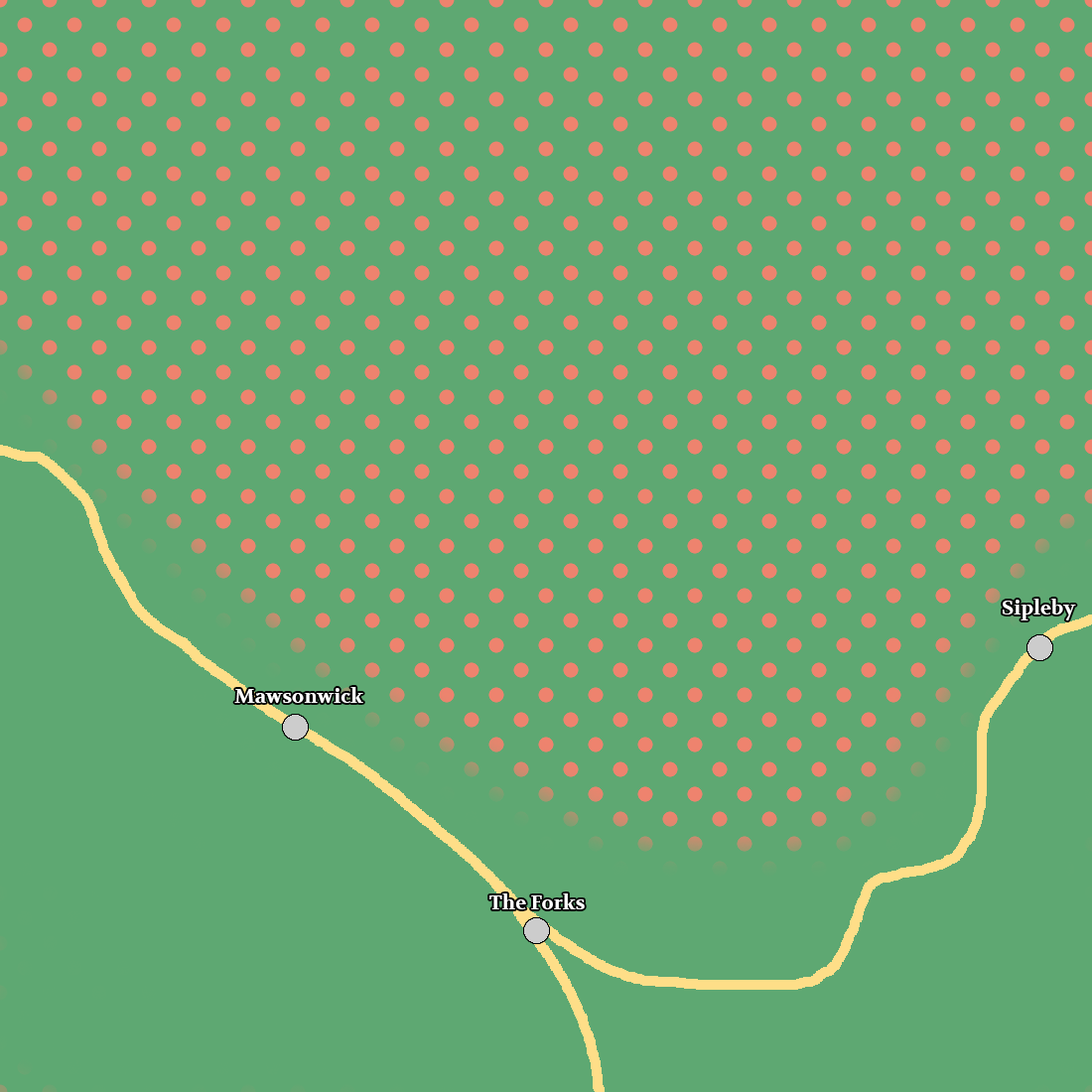
<style>
.page{position:relative;width:1092px;height:1092px;background:#5ea872}
.page>*{position:absolute;margin:0}
.t1{font:19.9px "Volkhov-Bold";color:#ffffff}
</style>
<div class="page">
<p class="t1" style="left:1003px;top:599px;width:73px;height:21px">Sipleby</p>
<p class="t1" style="left:234px;top:687px;width:129px;height:16px">Mawsonwick</p>
<p class="t1" style="left:489px;top:893px;width:96px;height:16px">The Forks</p>
</div>
